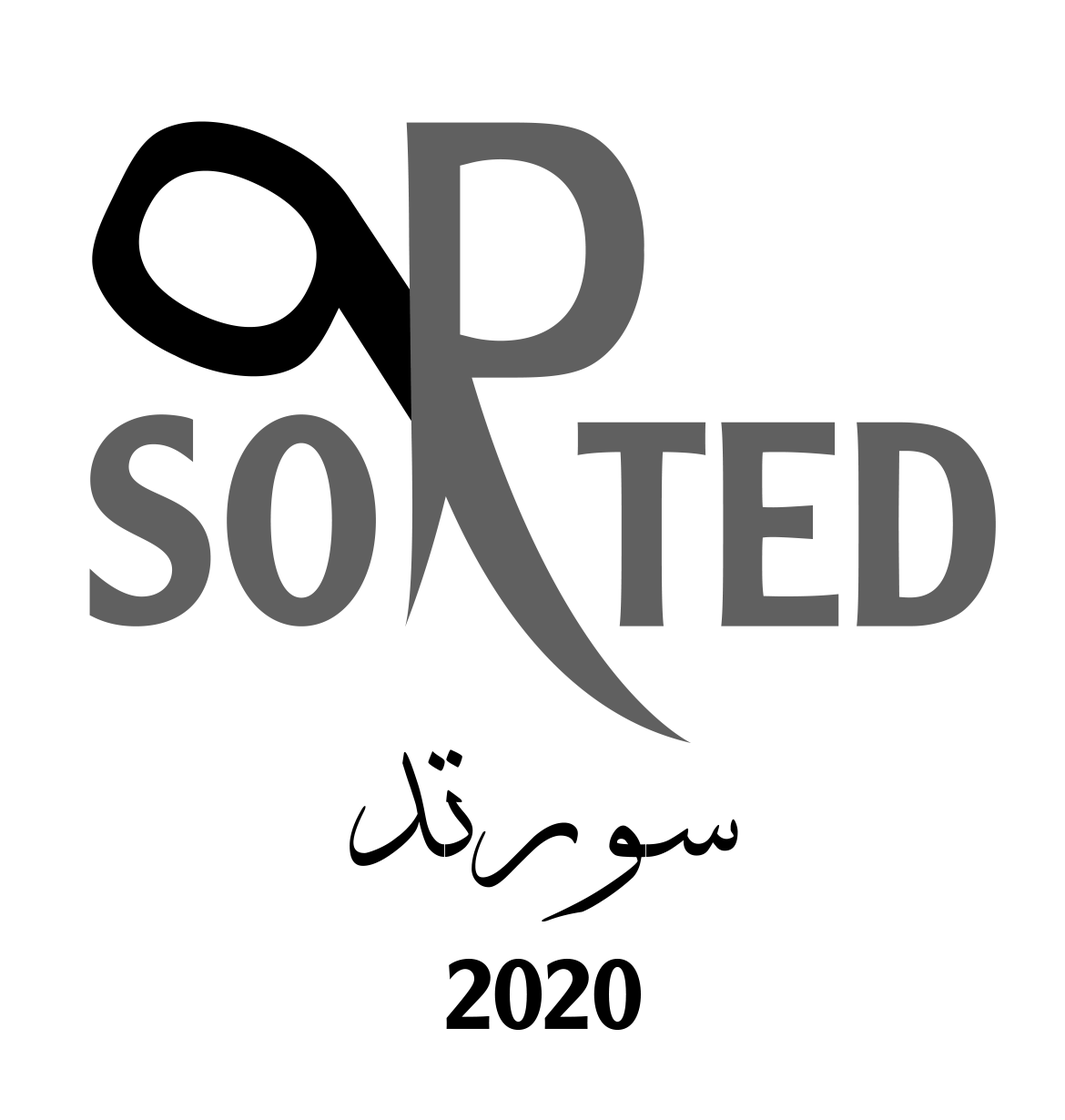
<style>
.page{position:relative;width:1065px;height:1120px;background:#ffffff}
.page>*{position:absolute;margin:0}
.t1{font:182.1px "DecoTypeThuluth";color:#000000}
.t2{font:101.5px "ClearfaceGothicLH-Medium";color:#000000;scale:0.94 1}
</style>
<div class="page">
<p class="t1" style="left:350px;top:749px;width:388px;height:172px">سورتد</p>
<p class="t2" style="left:446px;top:958px;width:195px;height:72px">2020</p>
</div>
